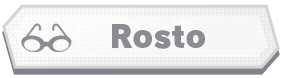
<style>
.page{position:relative;width:282px;height:78px}
.page>*{position:absolute;margin:0}
.t1{font:30.7px "RodinPro-UB";color:#8b8c92}
</style>
<div class="page">
<p class="t1" style="left:112px;top:24px;width:93px;height:25px">Rosto</p>
</div>
